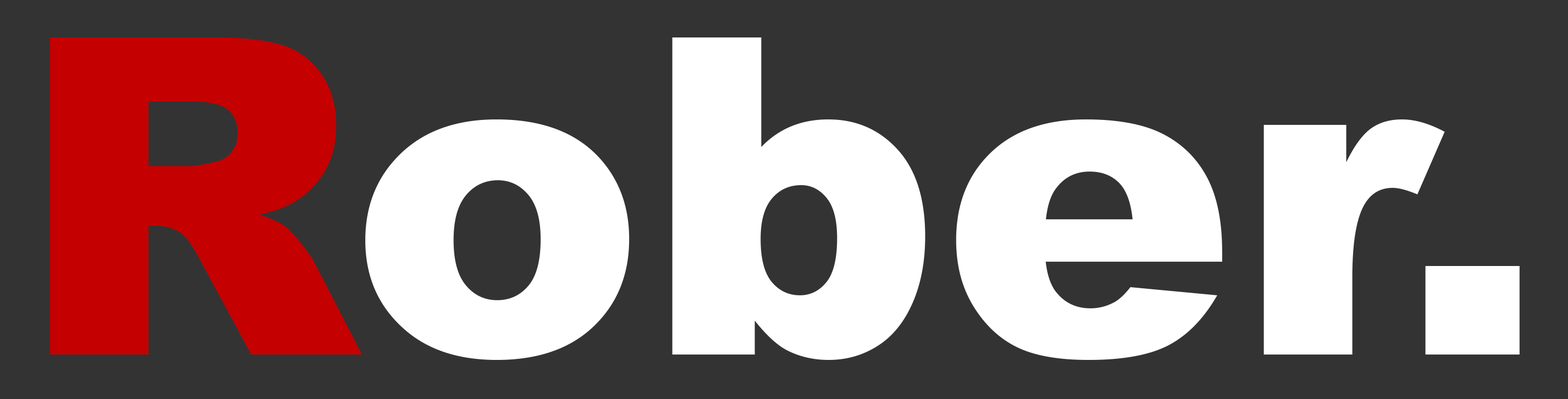
<style>
.page{position:relative;width:1568px;height:399px;background:#333333}
.page>*{position:absolute;margin:0}
.t1{font:443.1px "Arial-Black";color:#ffffff}
.t2{font:443.1px "Arial-Black";color:#c40000}
</style>
<div class="page">
<p class="t1" style="left:50px;top:37px;width:1470px;height:323px"><span class="t2">R</span>ober.</p>
</div>
